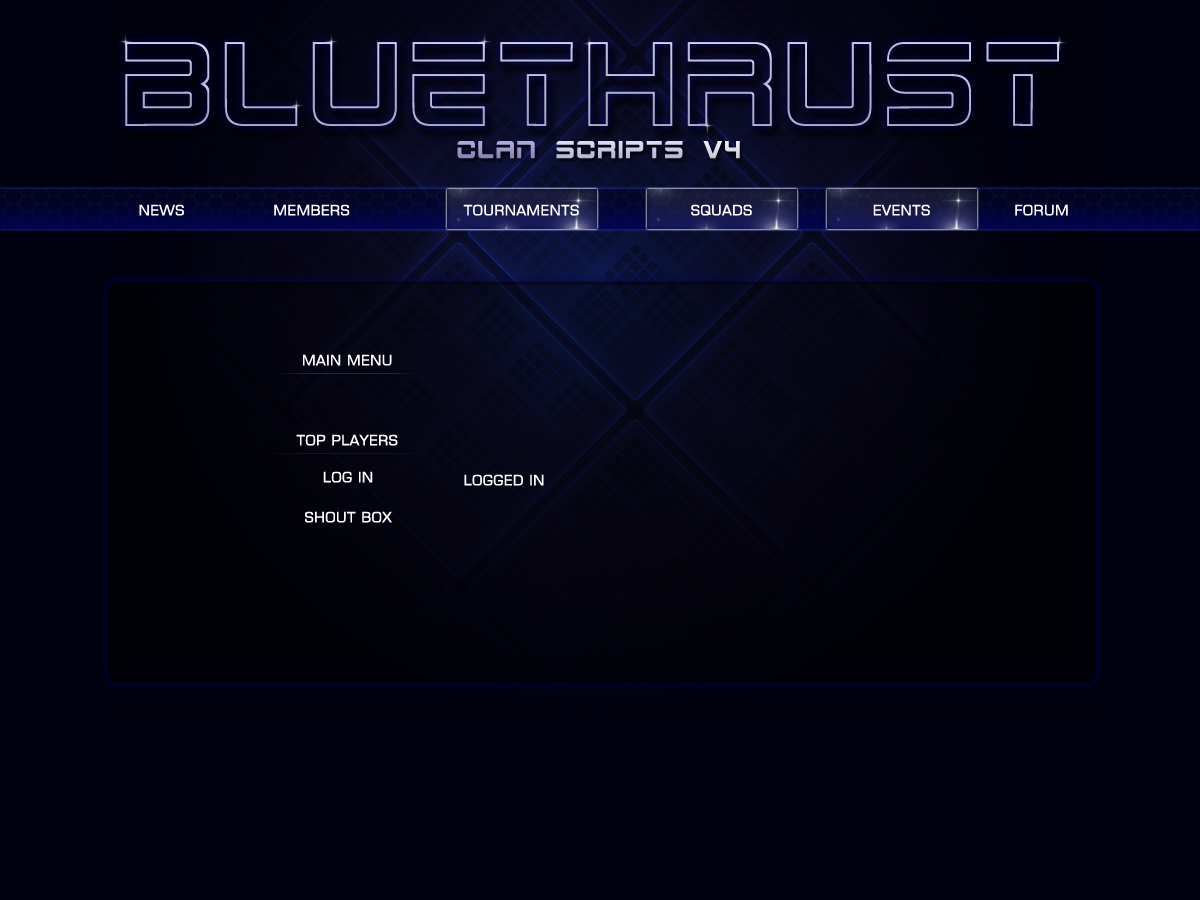
<style>
.page{position:relative;width:1200px;height:900px;background:#00010e}
.page>*{position:absolute;margin:0}
.t1{font:120px "2015CruiserHollow";color:#b7b8cf}
.t2{font:25px "2015Cruiser"}
.t3{font:18px "EuroCaps";color:#ffffff}
</style>
<div class="page">
<p class="t1" style="left:125px;top:42px;width:934px;height:84px">BLUETHRUST</p>
<p class="t2" style="left:457px;top:141px;width:283px;height:18px">CLAN SCRIPTS v4</p>
<p class="t3" style="left:139px;top:204px;width:45px;height:12px">NEWS</p>
<p class="t3" style="left:274px;top:204px;width:76px;height:12px">MEMBERS</p>
<p class="t3" style="left:463px;top:204px;width:116px;height:12px">TOURNAMENTS</p>
<p class="t3" style="left:691px;top:204px;width:61px;height:12px">SQUADS</p>
<p class="t3" style="left:873px;top:204px;width:57px;height:12px">EVENTS</p>
<p class="t3" style="left:1015px;top:204px;width:53px;height:12px">FORUM</p>
<p class="t3" style="left:303px;top:354px;width:89px;height:12px">MAIN MENU</p>
<p class="t3" style="left:296px;top:434px;width:102px;height:12px">TOP PLAYERS</p>
<p class="t3" style="left:323px;top:471px;width:50px;height:12px">LOG IN</p>
<p class="t3" style="left:464px;top:474px;width:80px;height:12px">LOGGED IN</p>
<p class="t3" style="left:305px;top:511px;width:87px;height:12px">SHOUT BOX</p>
</div>
